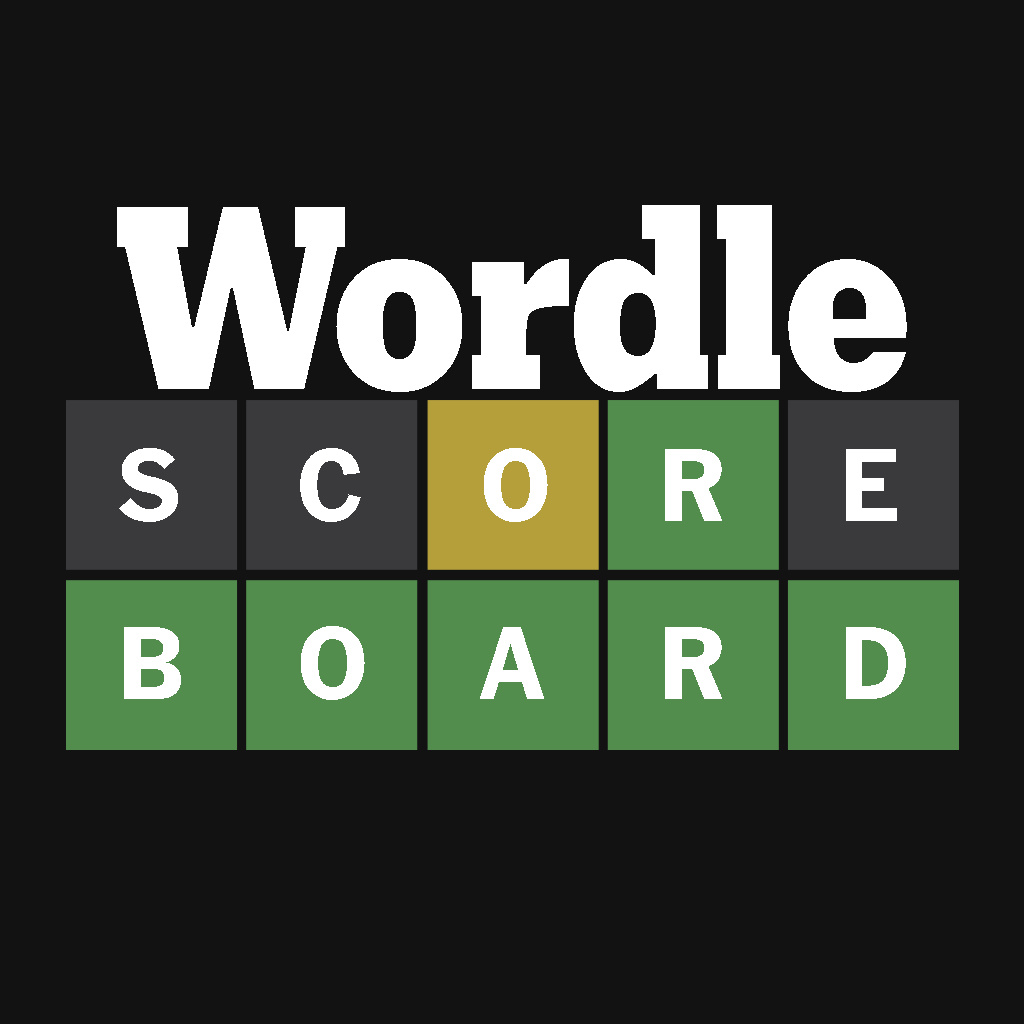
<style>
.page{position:relative;width:1024px;height:1024px;background:#121213}
.page>*{position:absolute;margin:0}
.t1{font:259.2px "NYTKarnak-Text";color:#ffffff;scale:0.83 1}
.t2{font:103.1px "NYTFranklin-Bold";color:#ffffff}
</style>
<div class="page">
<p class="t1" style="left:117px;top:205px;width:790px;height:187px">Wordle</p>
<p class="t2" style="left:119px;top:448px;width:59px;height:74px">S</p>
<p class="t2" style="left:300px;top:448px;width:61px;height:74px">C</p>
<p class="t2" style="left:484px;top:448px;width:64px;height:74px">O</p>
<p class="t2" style="left:665px;top:449px;width:57px;height:72px">R</p>
<p class="t2" style="left:846px;top:449px;width:51px;height:72px">E</p>
<p class="t2" style="left:124px;top:627px;width:57px;height:72px">B</p>
<p class="t2" style="left:301px;top:626px;width:64px;height:74px">O</p>
<p class="t2" style="left:480px;top:627px;width:64px;height:72px">A</p>
<p class="t2" style="left:665px;top:627px;width:57px;height:72px">R</p>
<p class="t2" style="left:846px;top:627px;width:60px;height:72px">D</p>
</div>
